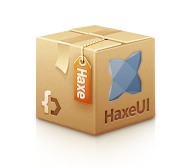
<style>
.page{position:relative;width:192px;height:168px;background:#ffffff}
.page>*{position:absolute;margin:0}
.t1{font:16px "BreuerText-Bold";letter-spacing:-0.01em;color:#faeadb;scale:0.96 1}
.t2{font:19px "MyriadPro-Bold";letter-spacing:-0.025em;color:#804320;scale:0.81 1}
</style>
<div class="page">
<p class="t1" style="left:77px;top:68px;width:10px;height:31px;rotate:90deg">Haxe</p>
<p class="t2" style="left:105px;top:98px;width:44px;height:26px;rotate:-16deg">HaxeUI</p>
</div>
